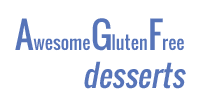
<style>
.page{position:relative;width:200px;height:100px;background:#ffffff}
.page>*{position:absolute;margin:0}
.t1{font:18px "Oswald-Regular";color:#5674b9}
.t2{font:36px "Oswald-Regular";color:#5674b9}
.t3{font:30px "Oswald-Regular";color:#5674b9;font-style:italic}
</style>
<div class="page">
<p class="t1" style="left:15px;top:18px;width:169px;height:33px"><span class="t2">A</span>wesome<span class="t2">G</span>luten<span class="t2">F</span>ree</p>
<p class="t3" style="left:84px;top:61px;width:102px;height:28px">desserts</p>
</div>
